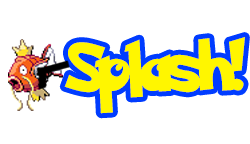
<style>
.page{position:relative;width:250px;height:144px;background:#ffffff}
.page>*{position:absolute;margin:0}
.t1{font:54.7px "PokemonSolidNormal";color:#fff600}
</style>
<div class="page">
<p class="t1" style="left:64px;top:37px;width:181px;height:77px">Splash!</p>
</div>
